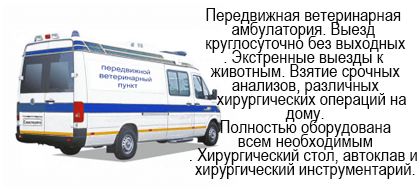
<style>
.page{position:relative;width:420px;height:191px;background:#ffffff}
.page>*{position:absolute;margin:0}
.t1{font:18px/7px "ArialNarrow";letter-spacing:0.002em;color:#0c0b0b}
</style>
<div class="page">
<p class="t1" style="left:190px;top:8px;width:227px;height:171px;text-align:center">Передвижная ветеринарная <br><br>амбулатория. Выезд<br><br> круглосуточно без выходных<br><br>. Экстренные выезды к<br><br> животным. Взятие срочных<br><br> анализов, различных<br><br>    хирургических операций на<br><br> дому.<br><br> Полностью оборудована<br><br> всем необходимым<br><br>. Хирургический стол, автоклав и<br><br> хирургический инструментарий.</p>
</div>
